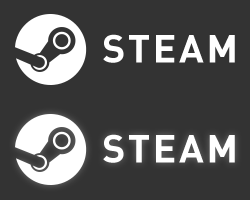
<style>
.page{position:relative;width:250px;height:200px;background:#333333}
.page>*{position:absolute;margin:0}
.t1{font:38.7px "DIN-Bold";letter-spacing:0.07em;color:#ffffff}
</style>
<div class="page">
<p class="t1" style="left:103px;top:34px;width:132px;height:29px">STEAM</p>
<p class="t1" style="left:103px;top:134px;width:132px;height:29px">STEAM</p>
</div>
